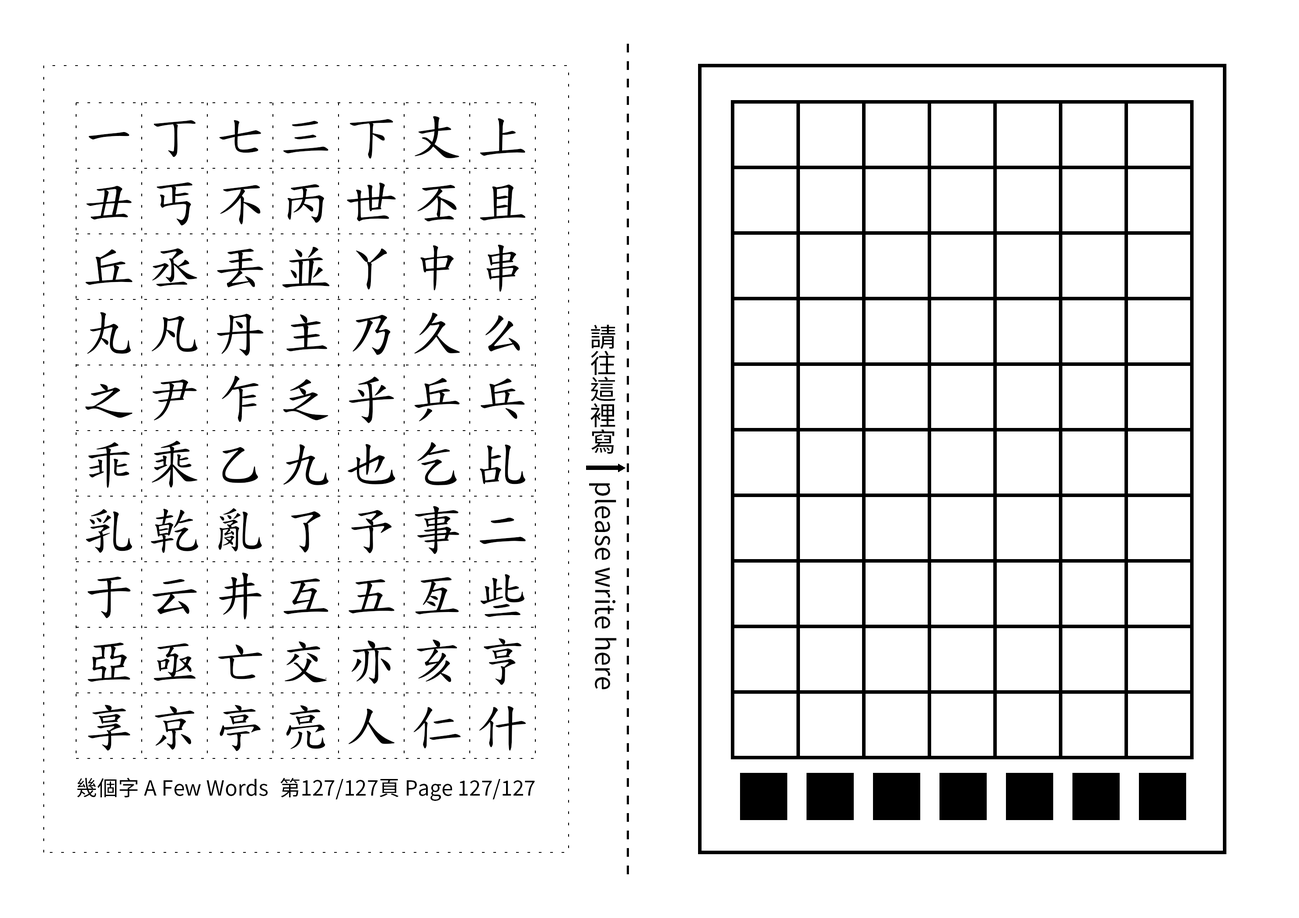
<style>
.page{position:relative;width:1299px;height:918px;background:#ffffff}
.page>*{position:absolute;margin:0}
.t1{font:52.5px/65.6px "TW-Kai-98_1";letter-spacing:0.25em;color:#000000}
.t2{font:26.2px "SourceHanSansTC-Regular";color:#000000}
.t3{font:21px "SourceHanSansTC-Regular";color:#000000}
</style>
<div class="page">
<p class="t1" style="left:85px;top:116px;width:441px;height:636px;text-align:center">一丁七三下丈上丑丐不丙世丕且丘丞丟並丫中串丸凡丹主乃久么之尹乍乏乎乒乓乖乘乙九也乞乩乳乾亂了予事二于云井互五亙些亞亟亡交亦亥亨享京亭亮人仁什</p>
<p class="t2" style="left:589px;top:324px;width:28px;height:366px;text-align:center">請往這裡寫　please write here</p>
<p class="t3" style="left:77px;top:778px;width:191px;height:20px">幾個字 A Few Words</p>
<p class="t3" style="left:280px;top:778px;width:255px;height:23px">第127/127頁 Page 127/127</p>
</div>
